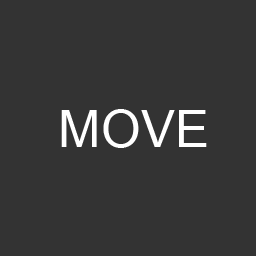
<style>
.page{position:relative;width:256px;height:256px;background:#333333}
.page>*{position:absolute;margin:0}
.t1{font:50.7px "ArialMT";color:#ffffff}
</style>
<div class="page">
<p class="t1" style="left:61px;top:109px;width:146px;height:39px">MOVE</p>
</div>
